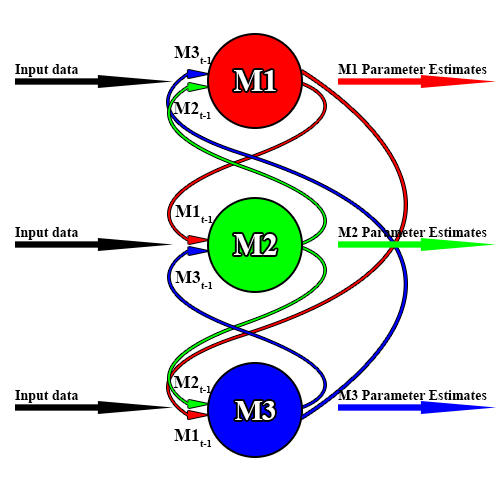
<style>
.page{position:relative;width:500px;height:500px;background:#ffffff}
.page>*{position:absolute;margin:0}
.t1{font:18px "TimesNewRomanPS-BoldMT";color:#000000}
.t2{font:24px "TimesNewRomanPS-BoldMT";color:#000000}
.t3{font:30.6px "TimesNewRomanPS-BoldMT";color:#ffffff}
.t4{font:28.6px "TimesNewRomanPS-BoldMT";color:#ffffff}
</style>
<div class="page">
<p class="t1" style="left:174px;top:46px;width:38px;height:18px">M3t-1</p>
<p class="t2" style="left:15px;top:64px;width:64px;height:13px">Input data</p>
<p class="t2" style="left:338px;top:64px;width:149px;height:10px">M1 Parameter Estimates</p>
<p class="t3" style="left:234px;top:70px;width:42px;height:21px">M1</p>
<p class="t1" style="left:173px;top:102px;width:38px;height:17px">M2t-1</p>
<p class="t1" style="left:175px;top:205px;width:38px;height:18px">M1t-1</p>
<p class="t2" style="left:15px;top:227px;width:64px;height:13px">Input data</p>
<p class="t2" style="left:338px;top:227px;width:149px;height:10px">M2 Parameter Estimates</p>
<p class="t3" style="left:234px;top:234px;width:43px;height:21px">M2</p>
<p class="t1" style="left:175px;top:271px;width:38px;height:18px">M3t-1</p>
<p class="t1" style="left:173px;top:376px;width:38px;height:17px">M2t-1</p>
<p class="t2" style="left:15px;top:390px;width:64px;height:13px">Input data</p>
<p class="t2" style="left:338px;top:390px;width:149px;height:10px">M3 Parameter Estimates</p>
<p class="t4" style="left:235px;top:401px;width:40px;height:19px">M3</p>
<p class="t1" style="left:174px;top:429px;width:38px;height:18px">M1t-1</p>
</div>
